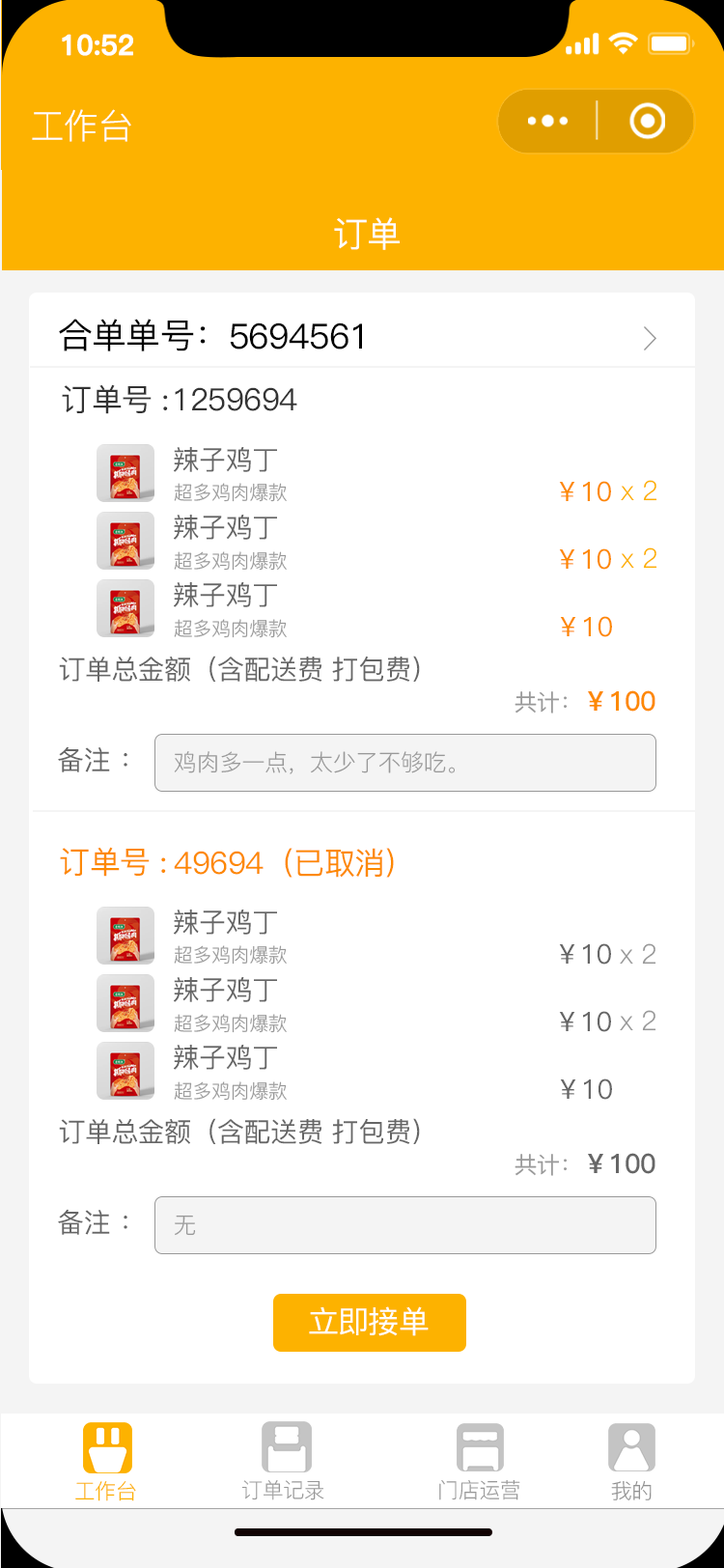
<style>
.page{position:relative;width:724px;height:1568px;background:#ffffff}
.page>*{position:absolute;margin:0}
.t1{font:27.5px "PingFang-SC-Bold";letter-spacing:-0.02em;color:#ffffff;font-weight:bold}
.t2{font:34.8px "PingFang-SC-Regular";letter-spacing:-0.02em;color:#ffffff}
.t3{font:34.8px "PingFang-SC-Medium";letter-spacing:-0.02em;color:#fefefe}
.t4{font:34.8px "PingFang-SC-Medium";letter-spacing:-0.02em;color:#000000}
.t5{font:30.9px "PingFang-SC-Medium";letter-spacing:-0.02em;color:#333333}
.t6{font:27px "PingFang-SC-Medium";letter-spacing:-0.02em;color:#666666}
.t7{font:19.3px "PingFang-SC-Regular";letter-spacing:-0.02em;color:#999999}
.t8{font:27px "PingFang-SC-Medium";letter-spacing:-0.02em;color:#fd8900}
.t9{font:27px "PingFang-SC-Regular";letter-spacing:-0.02em;color:#fdb100}
.t10{font:27px "PingFang-SC-Bold";letter-spacing:-0.02em;color:#fd8900}
.t11{font:23.2px "PingFang-SC-Medium";letter-spacing:-0.02em;color:#999999}
.t12{font:23.2px "PingFang-SC-Regular";letter-spacing:-0.02em;color:#999999}
.t13{font:30.9px "PingFang-SC-Medium";letter-spacing:-0.02em;color:#fd8900}
.t14{font:27px "PingFang-SC-Regular";letter-spacing:-0.02em;color:#999999}
.t15{font:27px "PingFang-SC-Bold";letter-spacing:-0.02em;color:#666666}
.t16{font:30.9px "PingFang-SC-Medium";letter-spacing:-0.02em;color:#ffffff}
.t17{font:21.2px "PingFang-SC-Regular";letter-spacing:-0.02em;color:#fdb200}
.t18{font:21.2px "PingFang-SC-Regular";letter-spacing:-0.02em;color:#999999}
.t19{font:21.2px "PingFang-SC-Regular";letter-spacing:-0.02em;color:#919191}
</style>
<div class="page">
<p class="t1" style="left:62px;top:34px;width:71px;height:22px">10:52</p>
<p class="t2" style="left:32px;top:109px;width:99px;height:33px">工作台</p>
<p class="t3" style="left:334px;top:217px;width:66px;height:33px">订单</p>
<p class="t4" style="left:59px;top:319px;width:147px;height:32px">合单单号：</p>
<p class="t4" style="left:230px;top:322px;width:132px;height:28px">5694561</p>
<p class="t5" style="left:62px;top:384px;width:106px;height:30px">订单号 :</p>
<p class="t5" style="left:175px;top:387px;width:122px;height:24px">1259694</p>
<p class="t6" style="left:174px;top:447px;width:103px;height:25px">辣子鸡丁</p>
<p class="t7" style="left:174px;top:483px;width:113px;height:19px">超多鸡肉爆款</p>
<p class="t8" style="left:559px;top:481px;width:52px;height:21px">￥10</p>
<p class="t9" style="left:621px;top:480px;width:37px;height:21px">x 2</p>
<p class="t6" style="left:174px;top:515px;width:103px;height:25px">辣子鸡丁</p>
<p class="t7" style="left:174px;top:551px;width:113px;height:20px">超多鸡肉爆款</p>
<p class="t8" style="left:559px;top:548px;width:52px;height:22px">￥10</p>
<p class="t9" style="left:621px;top:547px;width:37px;height:22px">x 2</p>
<p class="t6" style="left:174px;top:582px;width:103px;height:25px">辣子鸡丁</p>
<p class="t8" style="left:560px;top:616px;width:52px;height:21px">￥10</p>
<p class="t7" style="left:174px;top:619px;width:113px;height:19px">超多鸡肉爆款</p>
<p class="t6" style="left:59px;top:656px;width:361px;height:26px">订单总金额（含配送费 打包费）</p>
<p class="t10" style="left:515px;top:690px;width:141px;height:24px"><span class="t11">共计：</span>￥100</p>
<p class="t6" style="left:58px;top:746px;width:69px;height:26px">备注 ：</p>
<p class="t12" style="left:174px;top:751px;width:282px;height:23px">鸡肉多一点，太少了不够吃。</p>
<p class="t13" style="left:60px;top:847px;width:106px;height:30px">订单号 :</p>
<p class="t13" style="left:174px;top:848px;width:220px;height:30px">49694（已取消）</p>
<p class="t6" style="left:174px;top:910px;width:103px;height:25px">辣子鸡丁</p>
<p class="t7" style="left:174px;top:945px;width:113px;height:20px">超多鸡肉爆款</p>
<p class="t6" style="left:559px;top:943px;width:52px;height:22px">￥10</p>
<p class="t14" style="left:620px;top:943px;width:37px;height:22px">x 2</p>
<p class="t6" style="left:174px;top:977px;width:103px;height:25px">辣子鸡丁</p>
<p class="t7" style="left:174px;top:1014px;width:113px;height:19px">超多鸡肉爆款</p>
<p class="t6" style="left:559px;top:1011px;width:52px;height:21px">￥10</p>
<p class="t14" style="left:620px;top:1010px;width:37px;height:21px">x 2</p>
<p class="t6" style="left:174px;top:1045px;width:103px;height:25px">辣子鸡丁</p>
<p class="t7" style="left:174px;top:1081px;width:113px;height:20px">超多鸡肉爆款</p>
<p class="t6" style="left:560px;top:1078px;width:52px;height:22px">￥10</p>
<p class="t6" style="left:59px;top:1118px;width:361px;height:26px">订单总金额（含配送费 打包费）</p>
<p class="t15" style="left:515px;top:1153px;width:141px;height:23px"><span class="t11">共计：</span>￥100</p>
<p class="t6" style="left:58px;top:1209px;width:69px;height:26px">备注 ：</p>
<p class="t12" style="left:175px;top:1215px;width:21px;height:21px">无</p>
<p class="t16" style="left:309px;top:1306px;width:120px;height:30px">立即接单</p>
<p class="t17" style="left:75px;top:1481px;width:61px;height:20px">工作台</p>
<p class="t18" style="left:241px;top:1480px;width:83px;height:20px">订单记录</p>
<p class="t18" style="left:439px;top:1479px;width:81px;height:21px">门店运营</p>
<p class="t19" style="left:611px;top:1481px;width:41px;height:19px">我的</p>
</div>
